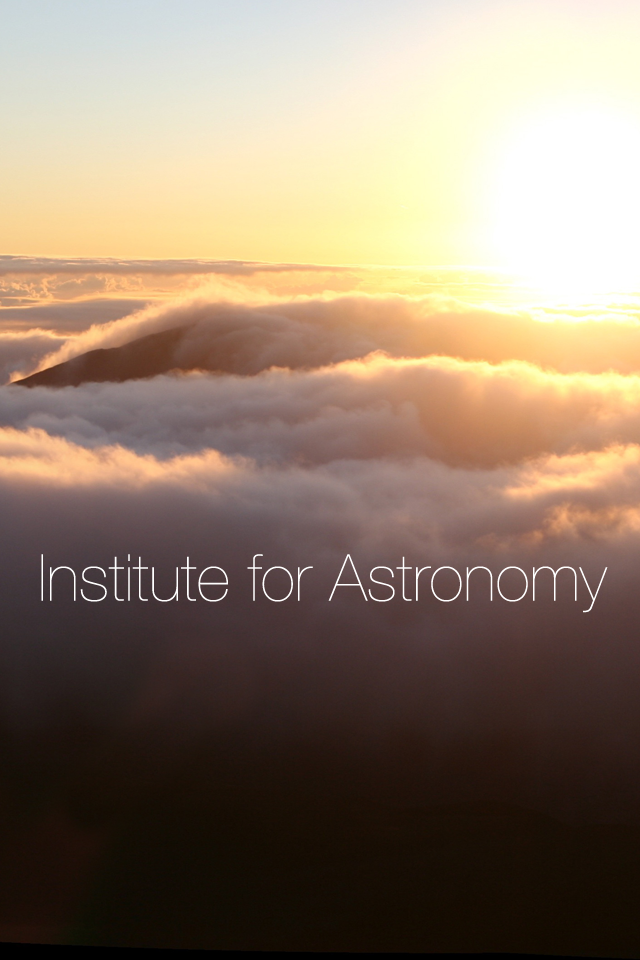
<style>
.page{position:relative;width:640px;height:960px}
.page>*{position:absolute;margin:0}
.t1{font:65px "HelveticaNeue-UltraLight";color:#ffffff}
</style>
<div class="page">
<p class="t1" style="left:41px;top:554px;width:567px;height:59px">Institute for Astronomy</p>
</div>
